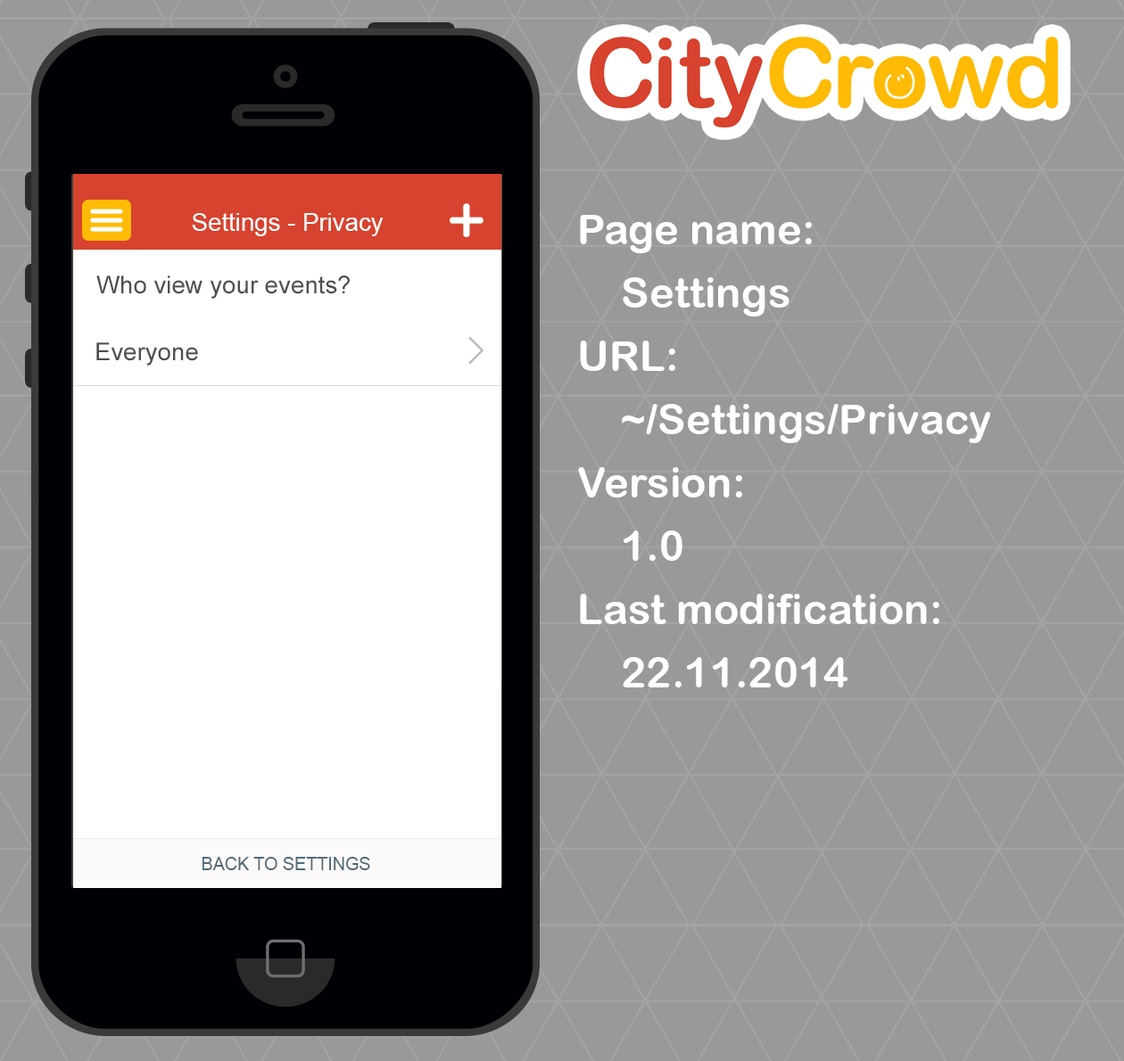
<style>
.page{position:relative;width:1124px;height:1061px;background:#999999}
.page>*{position:absolute;margin:0}
.t1{font:24.6px "ArialMT";color:#ffffff}
.t2{font:42.2px/63.3px "ArialRoundedMTBold";color:#ffffff}
.t3{font:24.6px "ArialMT";color:#505050}
.t4{font:17.6px "ArialMT";color:#536a7a}
</style>
<div class="page">
<p class="t1" style="left:192px;top:213px;width:191px;height:23px">Settings - Privacy</p>
<p class="t2" style="left:578px;top:215px;width:413px;height:473px">Page name:<br>Settings<br>URL:<br>~/Settings/Privacy<br>Version:<br>1.0<br>Last modification:<br>22.11.2014</p>
<p class="t3" style="left:96px;top:276px;width:254px;height:23px">Who view your events?</p>
<p class="t3" style="left:96px;top:342px;width:102px;height:24px">Everyone</p>
<p class="t4" style="left:202px;top:857px;width:168px;height:13px">BACK TO SETTINGS</p>
</div>
